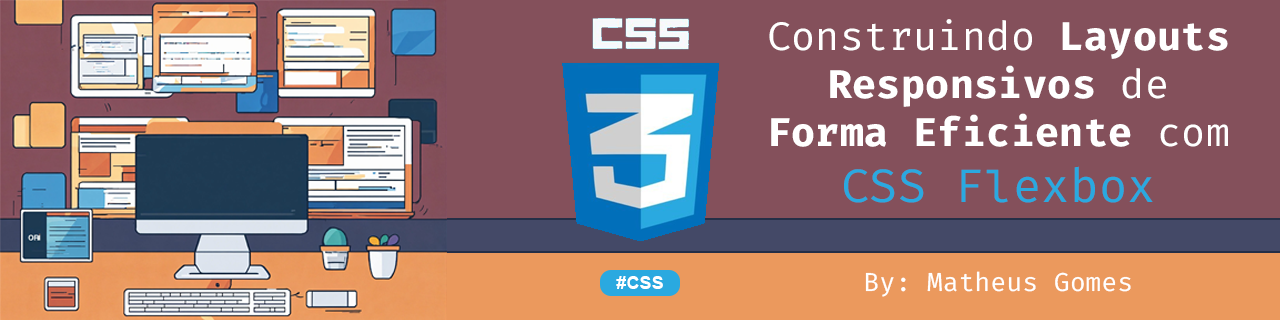
<style>
.page{position:relative;width:1280px;height:320px;background:#84505b}
.page>*{position:absolute;margin:0}
.t1{font:40px "FiraCode-Bold";letter-spacing:0.01em;color:#ffffff}
.t2{font:40px "FiraCode-Regular";letter-spacing:0.01em;color:#ffffff}
.t3{font:47px "FiraCode-Regular";letter-spacing:0.01em;color:#2aa9e0}
.t4{font:18px "Arial-BoldMT";letter-spacing:0.01em;color:#ffffff}
.t5{font:26px "FiraCode-Regular";letter-spacing:0.01em;color:#ffffff}
</style>
<div class="page">
<p class="t1" style="left:769px;top:19px;width:459px;height:184px;text-align:center"><span class="t2">Construindo </span>Layouts Responsivos<span class="t2"> de </span>Forma Eficiente<span class="t2"> com </span><span class="t3">CSS Flexbox</span></p>
<p class="t4" style="left:616px;top:276px;width:47px;height:13px">#CSS</p>
<p class="t5" style="left:865px;top:271px;width:266px;height:26px">By: Matheus Gomes</p>
</div>
